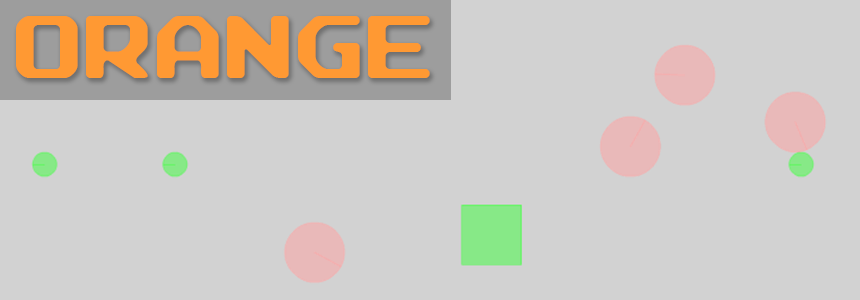
<style>
.page{position:relative;width:860px;height:300px;background:#d2d2d2}
.page>*{position:absolute;margin:0}
.t1{font:72px "ArcadeRounded";color:#ff9933}
</style>
<div class="page">
<p class="t1" style="left:16px;top:16px;width:414px;height:62px">Orange</p>
</div>
